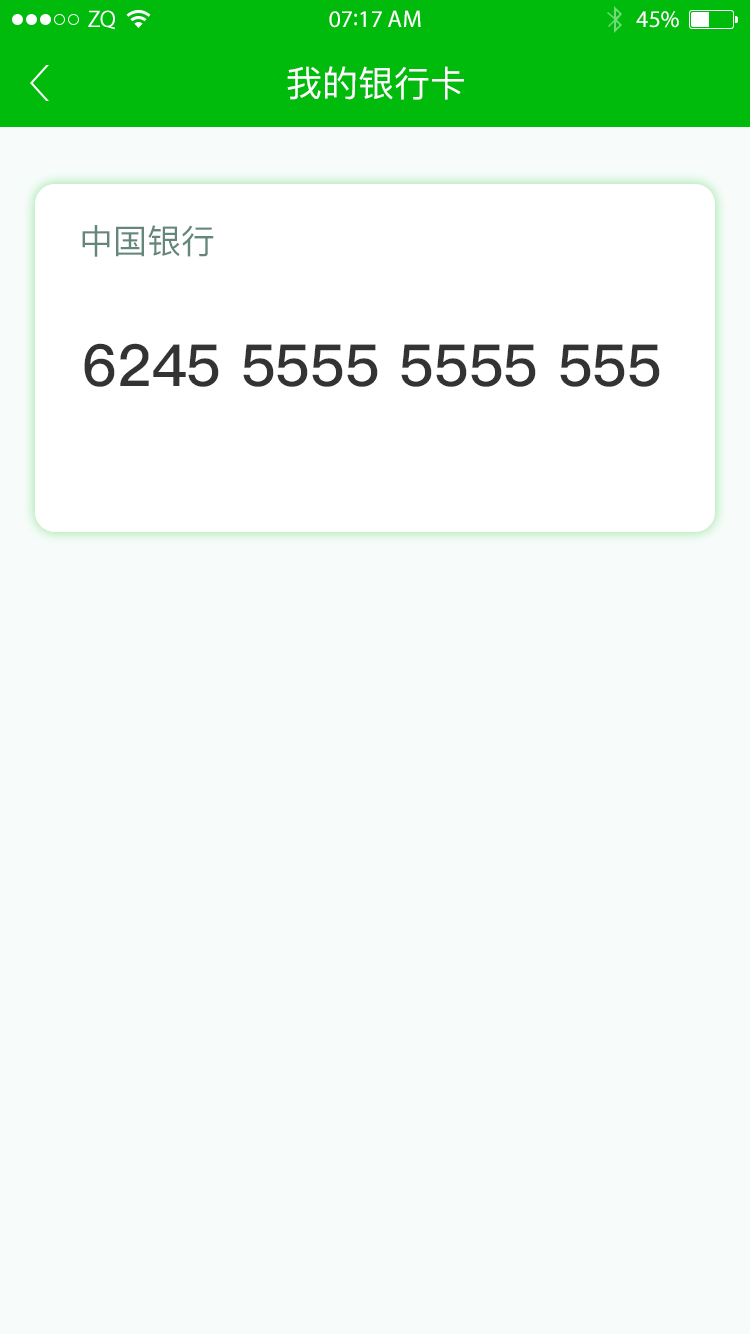
<style>
.page{position:relative;width:750px;height:1334px;background:#f7fcfa}
.page>*{position:absolute;margin:0}
.t1{font:24px "MyriadPro-Regular";color:#ffffff}
.t2{font:36px "PingFang-SC-Medium";color:#ffffff}
.t3{font:34px "PingFang-SC-Medium";color:#65877a}
.t4{font:58px "PingFang-SC-Bold";color:#333333}
</style>
<div class="page">
<p class="t1" style="left:329px;top:10px;width:92px;height:18px">07:17 AM</p>
<p class="t1" style="left:636px;top:11px;width:43px;height:17px">45%</p>
<p class="t2" style="left:287px;top:66px;width:177px;height:34px">我的银行卡</p>
<p class="t3" style="left:82px;top:225px;width:132px;height:32px">中国银行</p>
<p class="t4" style="left:84px;top:343px;width:576px;height:44px">6245 5555 5555 555</p>
</div>
